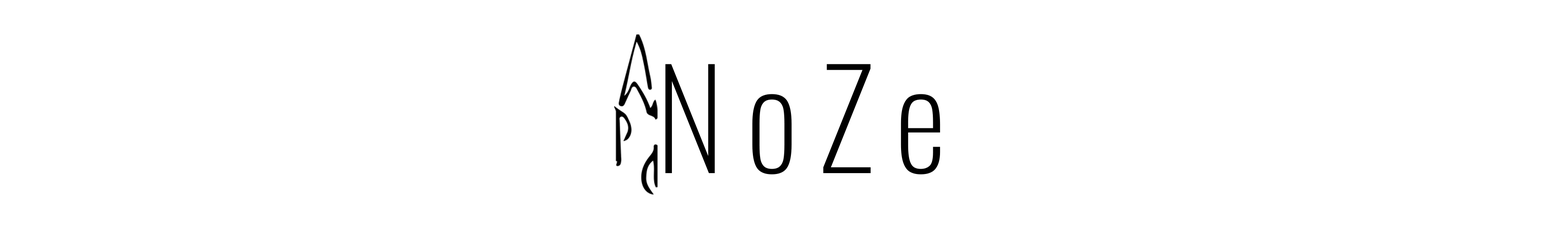
<style>
.page{position:relative;width:1568px;height:229px;background:#ffffff}
.page>*{position:absolute;margin:0}
.t1{font:134.6px "Oswald-ExtraLight";letter-spacing:0.16em;color:#000000}
</style>
<div class="page">
<p class="t1" style="left:665px;top:64px;width:275px;height:111px">NoZe</p>
</div>
